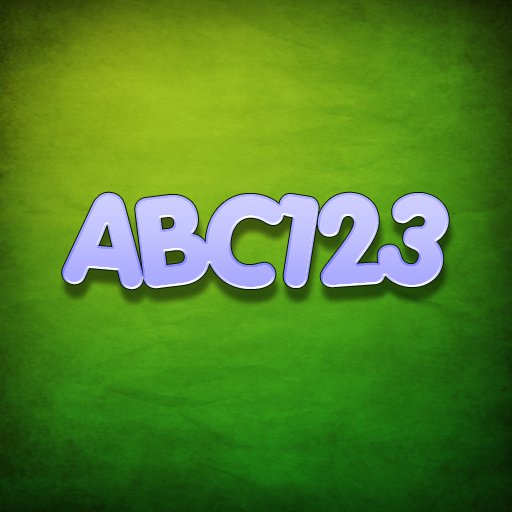
<style>
.page{position:relative;width:512px;height:512px}
.page>*{position:absolute;margin:0}
.t1{font:120px "Porkys";color:#bfbfff}
</style>
<div class="page">
<p class="t1" style="left:62px;top:192px;width:387px;height:98px">ABC123</p>
</div>
